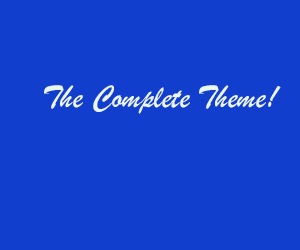
<style>
.page{position:relative;width:300px;height:250px;background:#123ece}
.page>*{position:absolute;margin:0}
.t1{font:33.3px "BrushScriptMT";color:#e9f6f7}
</style>
<div class="page">
<p class="t1" style="left:44px;top:85px;width:237px;height:29px">The Complete Theme!</p>
</div>
